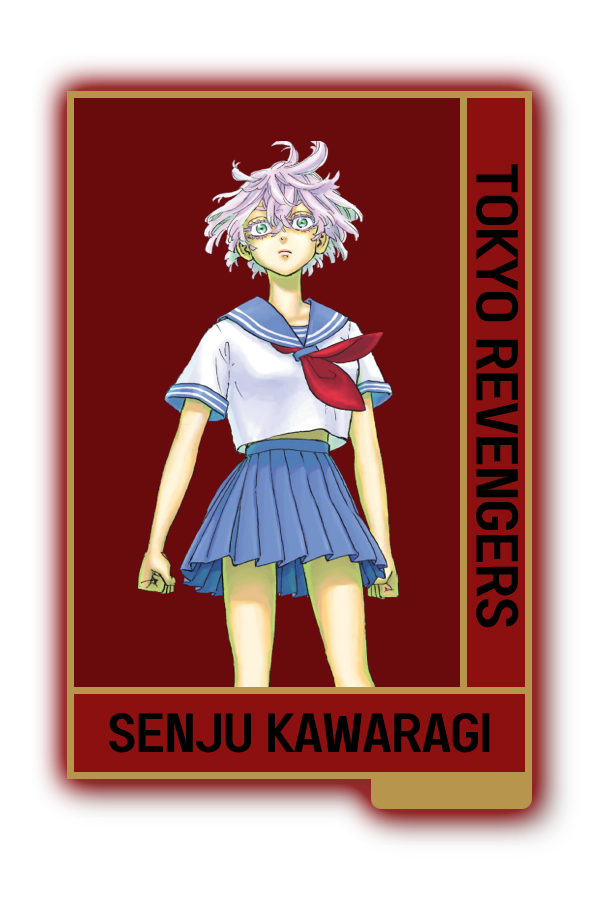
<style>
.page{position:relative;width:600px;height:900px;background:#690b0c}
.page>*{position:absolute;margin:0}
.t1{font:55.2px "aAreaKilometer50";color:#000000;scale:1.06 1}
.t2{font:51.7px "aAreaKilometer50";color:#000000}
</style>
<div class="page">
<p class="t1" style="left:476px;top:164px;width:43px;height:464px;rotate:90deg">TOKYO REVENGERS</p>
<p class="t2" style="left:109px;top:713px;width:381px;height:40px">SENJU KAWARAGI</p>
</div>
